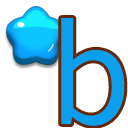
<style>
.page{position:relative;width:128px;height:128px;background:#ffffff}
.page>*{position:absolute;margin:0}
.t1{font:132.9px "SourceHanSansCN-Regular";color:#0b9fec}
</style>
<div class="page">
<p class="t1" style="left:61px;top:18px;width:64px;height:108px">b</p>
</div>
